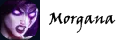
<style>
.page{position:relative;width:140px;height:40px;background:#ffffff}
.page>*{position:absolute;margin:0}
.t1{font:12px "VinerHandITC";color:#000000}
</style>
<div class="page">
<p class="t1" style="left:49px;top:12px;width:67px;height:21px">Morgana</p>
</div>
